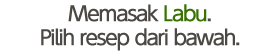
<style>
.page{position:relative;width:279px;height:52px;background:#ffffff}
.page>*{position:absolute;margin:0}
.t1{font:20px/24px "UDShinGoPro-Regular";letter-spacing:-0.08em;color:#4c4843;font-weight:bold}
.t2{font:20px/24px "UDShinGoPro-Regular";letter-spacing:-0.08em;color:#3a7103;font-weight:bold}
</style>
<div class="page">
<p class="t1" style="left:41px;top:4px;width:199px;height:47px;text-align:center">Memasak <span class="t2">Labu</span>.<br>Pilih resep dari bawah.</p>
</div>
